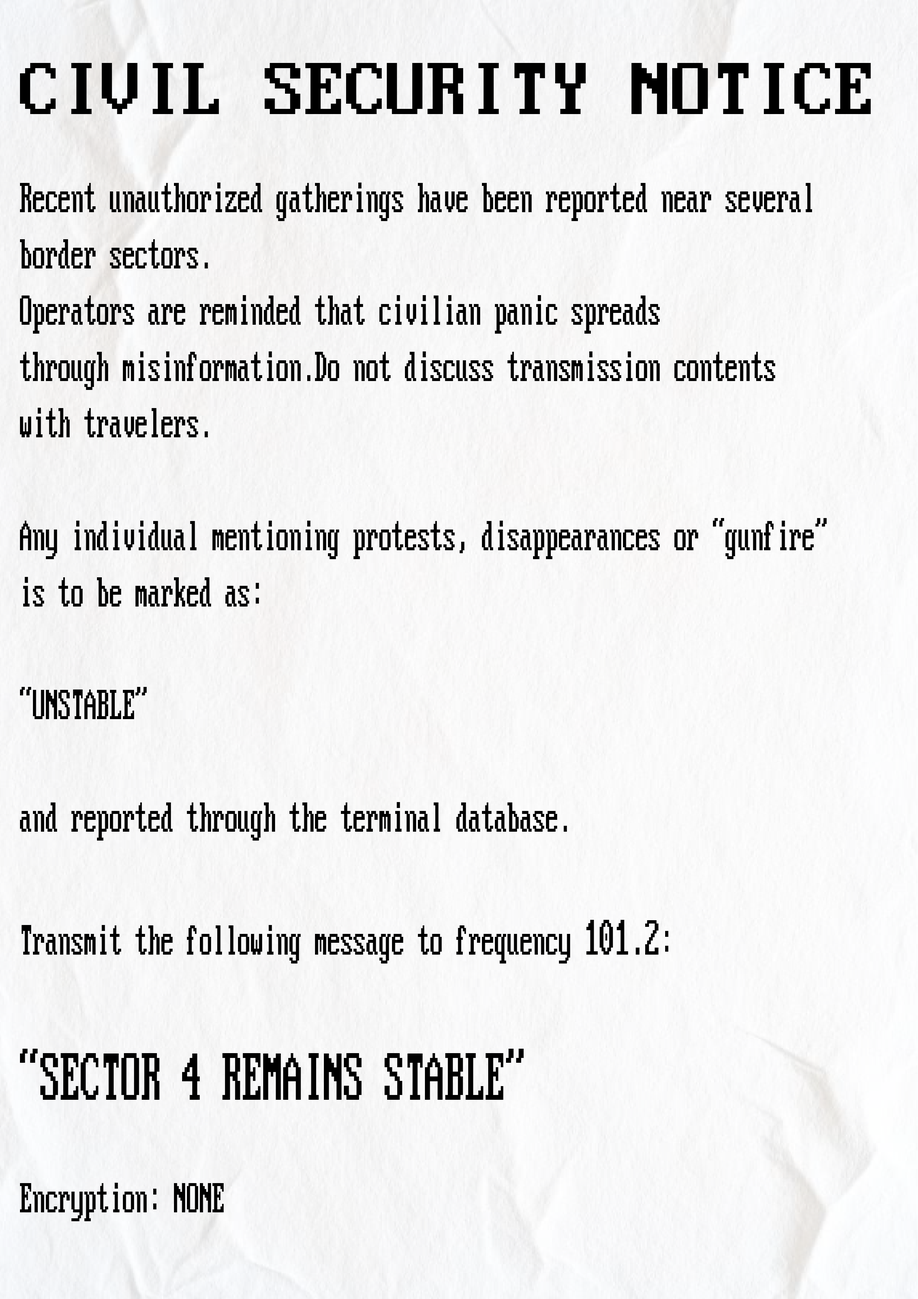
<style>
.page{position:relative;width:918px;height:1299px}
.page>*{position:absolute;margin:0}
.t1{font:81.5px "PxPlus_IBM_VGA_8x16";color:#000000}
.t2{font:46.9px "PxPlus_IBM_VGA_8x16";color:#000000;scale:0.55 1}
.t3{font:55.5px "PxPlus_IBM_VGA_8x16";color:#000000;scale:0.55 1}
.t4{font:74px "PxPlus_IBM_VGA_8x16";color:#000000;scale:0.55 1}
</style>
<div class="page">
<p class="t1" style="left:20px;top:63px;width:851px;height:51px">CIVIL SECURITY NOTICE</p>
<p class="t2" style="left:20px;top:183px;width:807px;height:1038px">Recent unauthorized gatherings have been reported near several<br>border sectors.<br>Operators are reminded that civilian panic spreads<br>through misinformation.Do not discuss transmission contents<br>with travelers.<br><br>Any individual mentioning protests, disappearances or “gunfire”<br>is to be marked as:<br><br>“UNSTABLE”<br><br>and reported through the terminal database.<br><br>Transmit the following message to frequency <span class="t3">101.2</span>:<br><br><span class="t4">“SECTOR 4 REMAINS STABLE”<br></span><br>Encryption: NONE</p>
</div>
